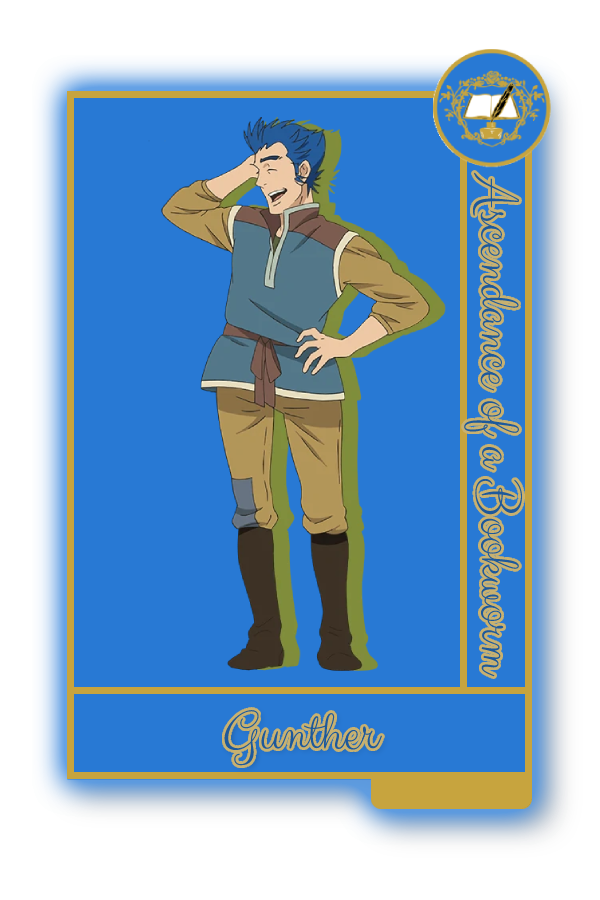
<style>
.page{position:relative;width:600px;height:900px;background:#2879d4}
.page>*{position:absolute;margin:0}
.t1{font:58px "ClickerScript-Regular";color:#1d599c}
.t2{font:60px "ClickerScript-Regular";color:#1d599c}
</style>
<div class="page">
<p class="t1" style="left:464px;top:172px;width:59px;height:505px;rotate:90deg">Ascendance of a Bookworm</p>
<p class="t2" style="left:224px;top:710px;width:158px;height:56px">Gunther</p>
</div>
